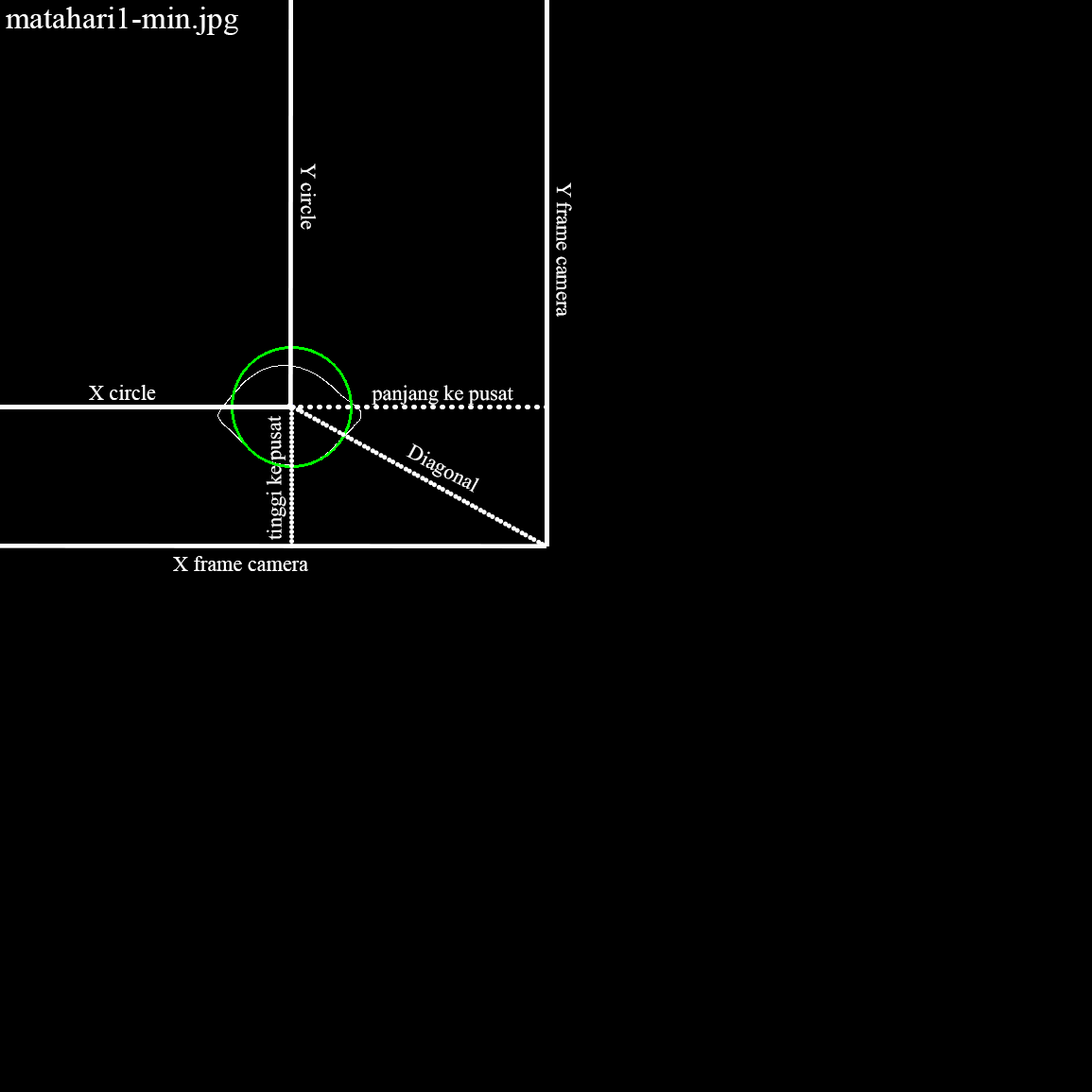
<style>
.page{position:relative;width:1092px;height:1092px;background:#000000}
.page>*{position:absolute;margin:0}
.t1{font:31.5px "TimesNewRomanPSMT";color:#ffffff}
.t2{font:21px "TimesNewRomanPSMT";color:#ffffff}
</style>
<div class="page">
<p class="t1" style="left:6px;top:7px;width:232px;height:28px">matahari1-min.jpg</p>
<p class="t2" style="left:301px;top:164px;width:15px;height:66px;rotate:90deg">Y circle</p>
<p class="t2" style="left:556px;top:182px;width:16px;height:135px;rotate:90deg">Y frame camera</p>
<p class="t2" style="left:89px;top:385px;width:67px;height:15px">X circle</p>
<p class="t2" style="left:372px;top:385px;width:141px;height:20px">panjang ke pusat</p>
<p class="t2" style="left:266px;top:415px;width:20px;height:125px;rotate:-90deg">tinggi ke pusat</p>
<p class="t2" style="left:406px;top:443px;width:73px;height:50px;rotate:28deg">Diagonal</p>
<p class="t2" style="left:173px;top:556px;width:135px;height:15px">X frame camera</p>
</div>
